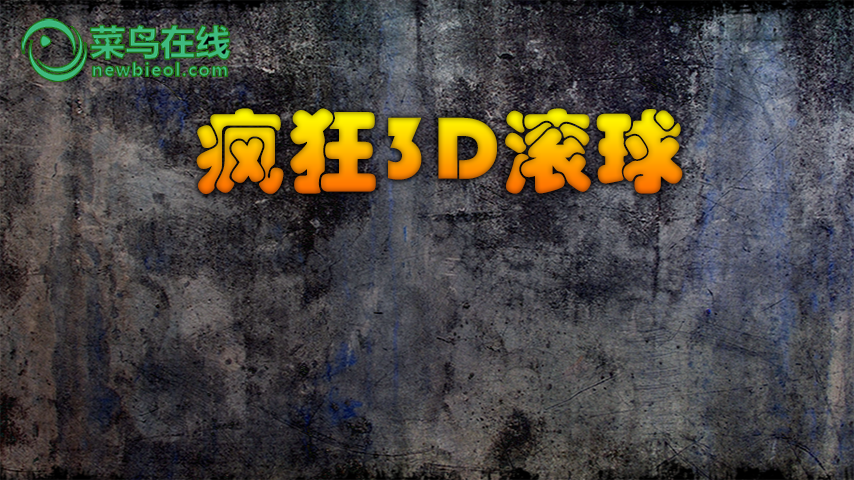
<style>
.page{position:relative;width:854px;height:480px}
.page>*{position:absolute;margin:0}
.t1{font:89.8px "STHupo";font-weight:bold}
</style>
<div class="page">
<p class="t1" style="left:196px;top:108px;width:487px;height:86px">疯狂3D滚球</p>
</div>
